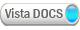
<style>
.page{position:relative;width:80px;height:30px;background:#ffffff}
.page>*{position:absolute;margin:0}
.t1{font:14px "FranklinGothic-MediumCond";color:#666666}
</style>
<div class="page">
<p class="t1" style="left:5px;top:8px;width:58px;height:10px">Vista DOCS</p>
</div>
